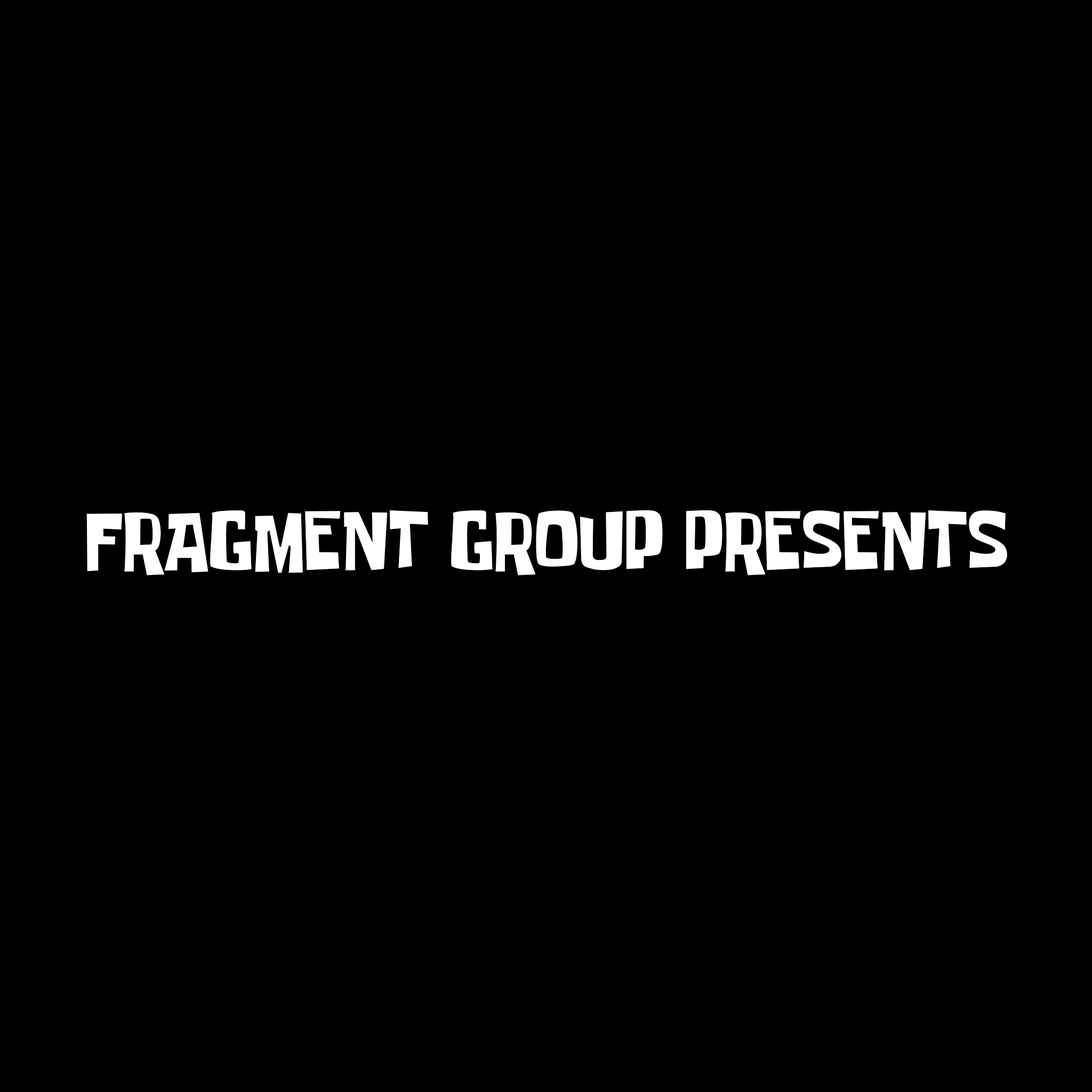
<style>
.page{position:relative;width:1092px;height:1092px;background:#000000}
.page>*{position:absolute;margin:0}
.t1{font:65.6px "SpongeboyMeBob";color:#ffffff}
</style>
<div class="page">
<p class="t1" style="left:86px;top:510px;width:921px;height:65px">FRAGMENT GROUP PRESENTS</p>
</div>
